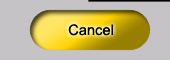
<style>
.page{position:relative;width:170px;height:60px;background:#c6c3c6}
.page>*{position:absolute;margin:0}
.t1{font:14.7px "ArialMT";color:#000000}
</style>
<div class="page">
<p class="t1" style="left:68px;top:24px;width:45px;height:12px">Cancel</p>
</div>
